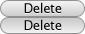
<style>
.page{position:relative;width:85px;height:34px}
.page>*{position:absolute;margin:0}
.t1{font:13px "LucidaGrande";letter-spacing:-0.025em;color:#000000}
</style>
<div class="page">
<p class="t1" style="left:24px;top:2px;width:38px;height:11px">Delete</p>
<p class="t1" style="left:24px;top:19px;width:38px;height:11px">Delete</p>
</div>
